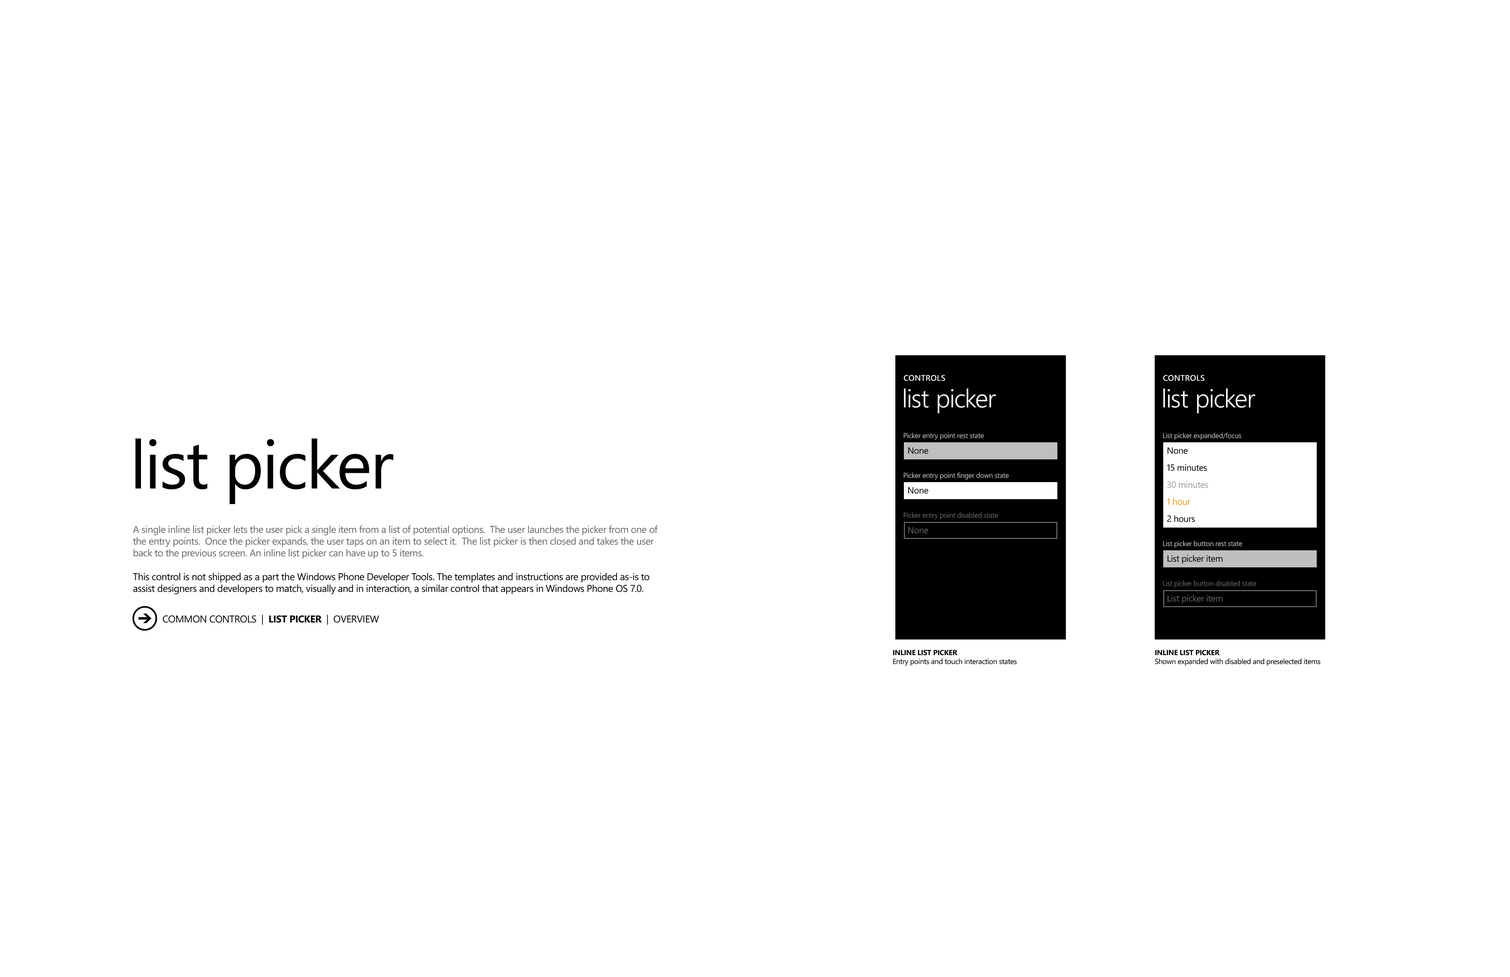
<style>
.page{position:relative;width:1510px;height:977px;background:#ffffff}
.page>*{position:absolute;margin:0}
.t1{font:8.1px "SegoeWP-Semibold";letter-spacing:0.025em;color:#ffffff;text-transform:uppercase}
.t2{font:25.6px "SegoeWP-SemiLight";letter-spacing:-0.01em;color:#ffffff}
.t3{font:7.1px "SegoeWP";letter-spacing:-0.025em;color:#bfbfbf}
.t4{font:67.4px "SegoeWP";letter-spacing:-0.025em;color:#000000}
.t5{font:9px "SegoeWP";letter-spacing:-0.025em;color:#000000}
.t6{font:9px "SegoeWP";letter-spacing:-0.025em;color:#999999}
.t7{font:9px "SegoeWP";letter-spacing:-0.025em;color:#f09609}
.t8{font:7.1px "SegoeWP";letter-spacing:-0.025em;color:#666666}
.t9{font:9.9px "SegoeWP";letter-spacing:-0.025em;color:#666666}
.t10{font:9.9px "SegoeWP";letter-spacing:-0.025em;color:#000000}
.t11{font:9px "SegoeWP";letter-spacing:-0.025em;color:#666666}
.t12{font:9.9px "SegoeWP-Bold";letter-spacing:-0.025em;color:#000000}
.t13{font:7.4px "SegoeWP";letter-spacing:-0.025em;color:#000000}
.t14{font:7.4px "SegoeWP-Bold";letter-spacing:-0.025em;color:#000000;text-transform:uppercase}
</style>
<div class="page">
<p class="t1" style="left:904px;top:375px;width:41px;height:6px">controls</p>
<p class="t1" style="left:1163px;top:375px;width:41px;height:6px">controls</p>
<p class="t2" style="left:904px;top:388px;width:92px;height:26px">list picker</p>
<p class="t2" style="left:1163px;top:388px;width:92px;height:26px">list picker</p>
<p class="t3" style="left:903px;top:433px;width:81px;height:7px">Picker entry point rest state</p>
<p class="t3" style="left:1163px;top:432px;width:78px;height:8px">List picker expanded/focus</p>
<p class="t4" style="left:135px;top:438px;width:258px;height:66px">list picker</p>
<p class="t5" style="left:908px;top:447px;width:20px;height:7px">None</p>
<p class="t5" style="left:1167px;top:447px;width:21px;height:7px">None</p>
<p class="t3" style="left:903px;top:472px;width:106px;height:8px">Picker entry point finger down state</p>
<p class="t5" style="left:1167px;top:464px;width:40px;height:7px">15 minutes</p>
<p class="t6" style="left:1167px;top:481px;width:41px;height:7px">30 minutes</p>
<p class="t5" style="left:908px;top:487px;width:20px;height:7px">None</p>
<p class="t7" style="left:1167px;top:498px;width:23px;height:7px">1 hour</p>
<p class="t8" style="left:903px;top:512px;width:95px;height:7px">Picker entry point disabled state</p>
<p class="t5" style="left:1167px;top:515px;width:28px;height:7px">2 hours</p>
<p class="t9" style="left:133px;top:525px;width:525px;height:69px">A single inline list picker lets the user pick a single item from a list of potential options.  The user launches the picker from one of the entry points.  Once the picker expands, the user taps on an item to select it.  The list picker is then closed and takes the user back to the previous screen. An inline list picker can have up to 5 items.<br><span class="t10"><br>This control is not shipped as a part the Windows Phone Developer Tools. The templates and instructions are provided as-is to assist designers and developers to match, visually and in interaction, a similar control that appears in Windows Phone OS 7.0.</span></p>
<p class="t11" style="left:908px;top:527px;width:20px;height:7px">None</p>
<p class="t3" style="left:1163px;top:541px;width:79px;height:7px">List picker button rest state</p>
<p class="t5" style="left:1167px;top:555px;width:55px;height:9px">List picker item</p>
<p class="t8" style="left:1163px;top:581px;width:93px;height:7px">List picker button disabled state</p>
<p class="t11" style="left:1167px;top:595px;width:55px;height:9px">List picker item</p>
<p class="t10" style="left:163px;top:615px;width:216px;height:10px">COMMON CONTROLS  |  <span class="t12">LIST PICKER</span>  |  OVERVIEW</p>
<p class="t13" style="left:893px;top:650px;width:124px;height:16px"><span class="t14">INLINE LIST PICKER<br></span>Entry points and touch interaction states</p>
<p class="t13" style="left:1155px;top:650px;width:165px;height:16px"><span class="t14">inline list picker<br></span>Shown expanded with disabled and preselected items</p>
</div>
